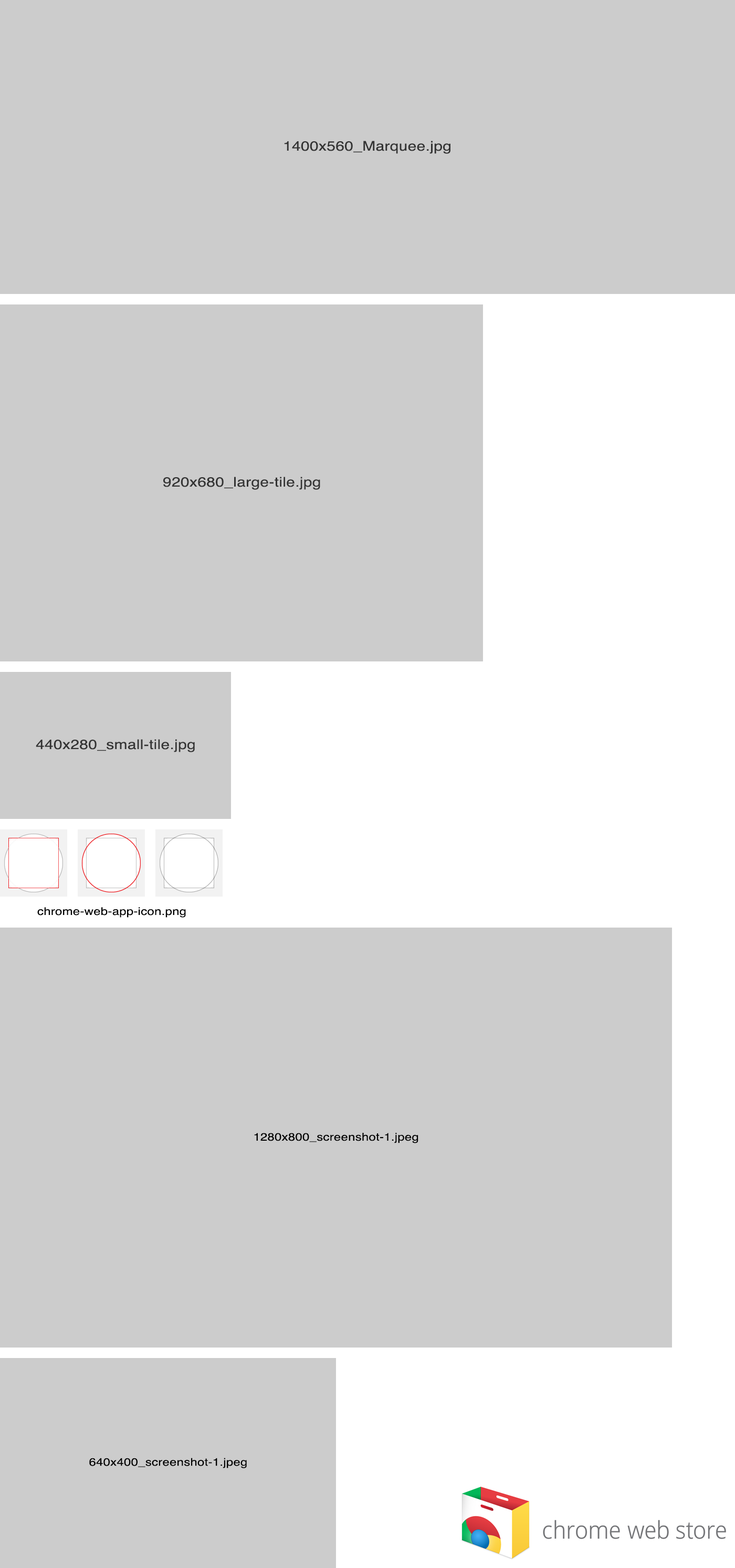
<style>
.page{position:relative;width:735px;height:1568px;background:#cccccc}
.page>*{position:absolute;margin:0}
.t1{font:13.4px "Helvetica";letter-spacing:0.01em;color:#333333;scale:1.18 1}
.t2{font:10.7px "Helvetica";letter-spacing:0.01em;color:#000000;scale:1.18 1}
</style>
<div class="page">
<p class="t1" style="left:284px;top:141px;width:166px;height:13px">1400x560_Marquee.jpg</p>
<p class="t1" style="left:163px;top:477px;width:157px;height:13px">920x680_large-tile.jpg</p>
<p class="t1" style="left:36px;top:739px;width:159px;height:13px">440x280_small-tile.jpg</p>
<p class="t2" style="left:37px;top:907px;width:149px;height:11px">chrome-web-app-icon.png</p>
<p class="t2" style="left:254px;top:1133px;width:164px;height:10px">1280x800_screenshot-1.jpeg</p>
<p class="t2" style="left:89px;top:1458px;width:158px;height:10px">640x400_screenshot-1.jpeg</p>
</div>
